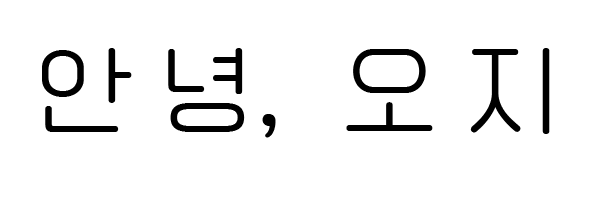
<style>
.page{position:relative;width:600px;height:200px;background:#ffffff}
.page>*{position:absolute;margin:0}
.t1{font:100px "Cafe24Ssurroundair";color:#000000}
</style>
<div class="page">
<p class="t1" style="left:42px;top:48px;width:508px;height:90px">안 녕,  오 지</p>
</div>
